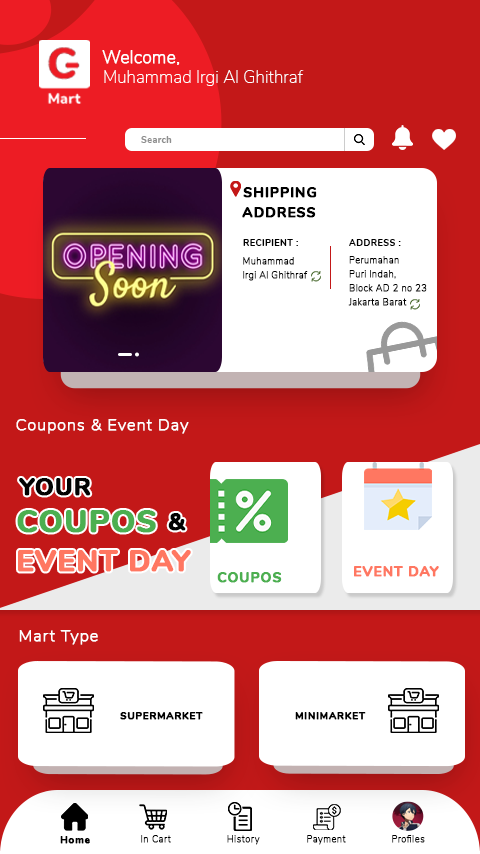
<style>
.page{position:relative;width:480px;height:854px;background:#ffffff}
.page>*{position:absolute;margin:0}
.t1{font:16.9px "Nunito-ExtraLight";letter-spacing:0.005em;color:#ffffff;font-weight:bold}
.t2{font:16.9px "Nunito-ExtraLight";letter-spacing:0.005em;color:#ffffff}
.t3{font:9.5px "Nunito-ExtraBold";letter-spacing:0.01em;color:#8f8f8f}
.t4{font:14.5px "Nunito-ExtraBold";letter-spacing:0.01em;color:#000000;font-weight:bold}
.t5{font:9.5px "Nunito-ExtraBold";letter-spacing:0.01em;color:#000000}
.t6{font:9.5px "Nunito-ExtraLight";letter-spacing:0.01em;color:#000000;font-weight:bold}
.t7{font:15.9px "Nunito-ExtraLight";letter-spacing:0.05em;color:#ffffff;font-weight:bold}
.t8{font:24.5px "Nunito-ExtraBold";letter-spacing:0.01em;color:#020202;font-weight:bold}
.t9{font:31.5px "Nunito-ExtraBold";letter-spacing:0.01em;color:#4caf50;font-weight:bold}
.t10{font:29.5px "Nunito-ExtraBold";letter-spacing:0.01em;color:#ff7761;font-weight:bold}
.t11{font:14.5px "Nunito-ExtraBold";letter-spacing:0.01em;color:#ff7761;font-weight:bold}
.t12{font:14.5px "Nunito-ExtraBold";letter-spacing:0.01em;color:#4caf50;font-weight:bold}
.t13{font:9.9px "Nunito-ExtraBold";letter-spacing:0.05em;color:#000000;font-weight:bold}
.t14{font:8.7px "Nunito-ExtraLight";letter-spacing:0.07em;color:#000000;font-weight:bold}
</style>
<div class="page">
<p class="t1" style="left:102px;top:50px;width:78px;height:15px">Welcome,</p>
<p class="t2" style="left:104px;top:70px;width:200px;height:16px">Muhammad Irgi Al Ghithraf</p>
<p class="t3" style="left:141px;top:136px;width:31px;height:7px">Search</p>
<p class="t4" style="left:243px;top:187px;width:74px;height:11px">SHIPPING</p>
<p class="t4" style="left:242px;top:207px;width:74px;height:11px">ADDRESS</p>
<p class="t5" style="left:243px;top:239px;width:55px;height:7px">RECIPIENT :</p>
<p class="t5" style="left:349px;top:239px;width:52px;height:7px">ADDRESS :</p>
<p class="t6" style="left:243px;top:257px;width:51px;height:8px">Muhammad</p>
<p class="t6" style="left:349px;top:256px;width:50px;height:8px">Perumahan</p>
<p class="t6" style="left:349px;top:270px;width:47px;height:9px">Puri Indah,</p>
<p class="t6" style="left:243px;top:271px;width:65px;height:10px">Irgi Al Ghithraf</p>
<p class="t6" style="left:349px;top:284px;width:78px;height:8px">Block AD 2 no 23</p>
<p class="t6" style="left:348px;top:298px;width:59px;height:8px">Jakarta Barat</p>
<p class="t7" style="left:16px;top:419px;width:173px;height:15px">Coupons &amp; Event Day</p>
<p class="t8" style="left:19px;top:478px;width:72px;height:18px">YOUR</p>
<p class="t9" style="left:17px;top:510px;width:139px;height:23px">COUPOS</p>
<p class="t8" style="left:168px;top:513px;width:18px;height:18px">&amp;</p>
<p class="t10" style="left:18px;top:550px;width:173px;height:22px">EVENT DAY</p>
<p class="t11" style="left:354px;top:566px;width:85px;height:11px">EVENT DAY</p>
<p class="t12" style="left:217px;top:572px;width:65px;height:11px">COUPOS</p>
<p class="t7" style="left:19px;top:630px;width:79px;height:15px">Mart Type</p>
<p class="t13" style="left:120px;top:712px;width:83px;height:8px">SUPERMARKET</p>
<p class="t13" style="left:295px;top:712px;width:71px;height:8px">MINIMARKET</p>
<p class="t13" style="left:60px;top:836px;width:30px;height:8px">Home</p>
<p class="t14" style="left:141px;top:835px;width:30px;height:8px">In Cart</p>
<p class="t14" style="left:227px;top:835px;width:33px;height:10px">History</p>
<p class="t14" style="left:307px;top:835px;width:39px;height:10px">Payment</p>
<p class="t14" style="left:392px;top:835px;width:33px;height:8px">Profiles</p>
</div>
